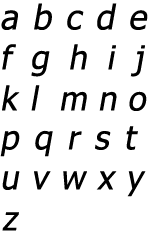
<style>
.page{position:relative;width:150px;height:240px;background:#ffffff}
.page>*{position:absolute;margin:0}
.t1{font:34px "Tahoma";letter-spacing:0.42em;color:#000000;font-style:italic}
.t2{font:33px "Tahoma";letter-spacing:0.6em;color:#000000;font-style:italic}
.t3{font:33px "Tahoma";letter-spacing:0.34em;color:#000000;font-style:italic}
.t4{font:33px "Tahoma";letter-spacing:0.4em;color:#000000;font-style:italic}
.t5{font:33px "Tahoma";letter-spacing:0.46em;color:#000000;font-style:italic}
.t6{font:33px "Tahoma";letter-spacing:0.38em;color:#000000;font-style:italic}
</style>
<div class="page">
<p class="t1" style="left:1px;top:3px;width:147px;height:27px">abcde</p>
<p class="t2" style="left:2px;top:44px;width:143px;height:33px">fghij</p>
<p class="t3" style="left:2px;top:85px;width:145px;height:26px"><span class="t4">kl </span>mno</p>
<p class="t5" style="left:0px;top:126px;width:138px;height:31px">pqrst</p>
<p class="t6" style="left:2px;top:171px;width:144px;height:26px">uvwxy</p>
<p class="t6" style="left:2px;top:212px;width:17px;height:19px">z</p>
</div>
